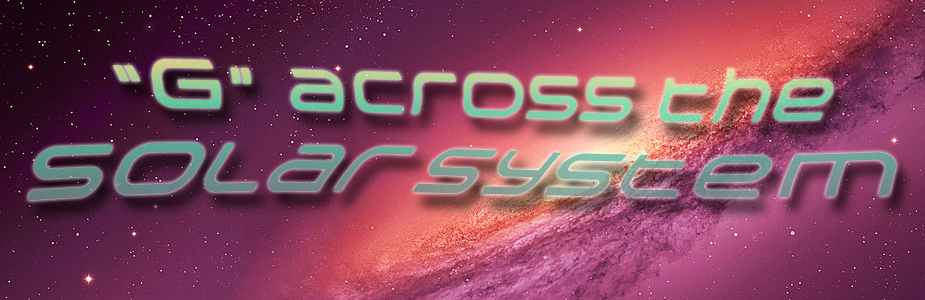
<style>
.page{position:relative;width:925px;height:300px}
.page>*{position:absolute;margin:0}
.t1{font:60px "Arkitech-Bold";font-style:italic}
.t2{font:72px "Arkitech-Bold";font-style:italic}
</style>
<div class="page">
<p class="t1" style="left:27px;top:59px;width:869px;height:142px;text-align:center">“<span class="t2">g</span>” across the <span class="t2">Solar System</span></p>
</div>
